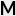
<style>
.page{position:relative;width:16px;height:16px;background:#eeeeee}
.page>*{position:absolute;margin:0}
.t1{font:18px "Lato-Bold";color:#000000}
</style>
<div class="page">
<p class="t1" style="left:1px;top:1px;width:15px;height:14px">M</p>
</div>
